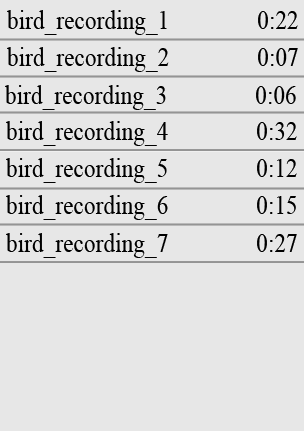
<style>
.page{position:relative;width:304px;height:431px;background:#e7e7e7}
.page>*{position:absolute;margin:0}
.t1{font:26.8px "IskoolaPota";color:#010101;scale:0.87 1}
.t2{font:26.8px "IskoolaPota";color:#000000;scale:0.87 1}
</style>
<div class="page">
<p class="t1" style="left:7px;top:10px;width:291px;height:25px">bird_recording_1             0:22</p>
<p class="t2" style="left:7px;top:47px;width:291px;height:25px">bird_recording_2             0:07</p>
<p class="t2" style="left:5px;top:85px;width:291px;height:25px">bird_recording_3             0:06</p>
<p class="t2" style="left:6px;top:121px;width:291px;height:25px">bird_recording_4             0:32</p>
<p class="t2" style="left:6px;top:158px;width:291px;height:25px">bird_recording_5             0:12</p>
<p class="t2" style="left:6px;top:195px;width:290px;height:25px">bird_recording_6             0:15</p>
<p class="t2" style="left:6px;top:233px;width:291px;height:25px">bird_recording_7             0:27</p>
</div>
